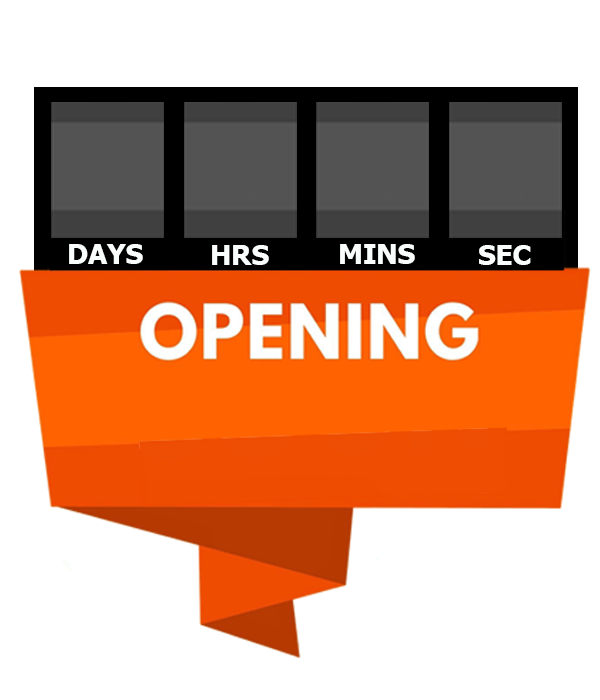
<style>
.page{position:relative;width:600px;height:700px;background:#ffffff}
.page>*{position:absolute;margin:0}
.t1{font:27.8px "Tahoma-Bold";color:#f9fdfc}
</style>
<div class="page">
<p class="t1" style="left:69px;top:244px;width:74px;height:20px">DAYS</p>
<p class="t1" style="left:212px;top:245px;width:57px;height:20px">HRS</p>
<p class="t1" style="left:340px;top:244px;width:75px;height:20px">MINS</p>
<p class="t1" style="left:479px;top:245px;width:52px;height:20px">SEC</p>
</div>
